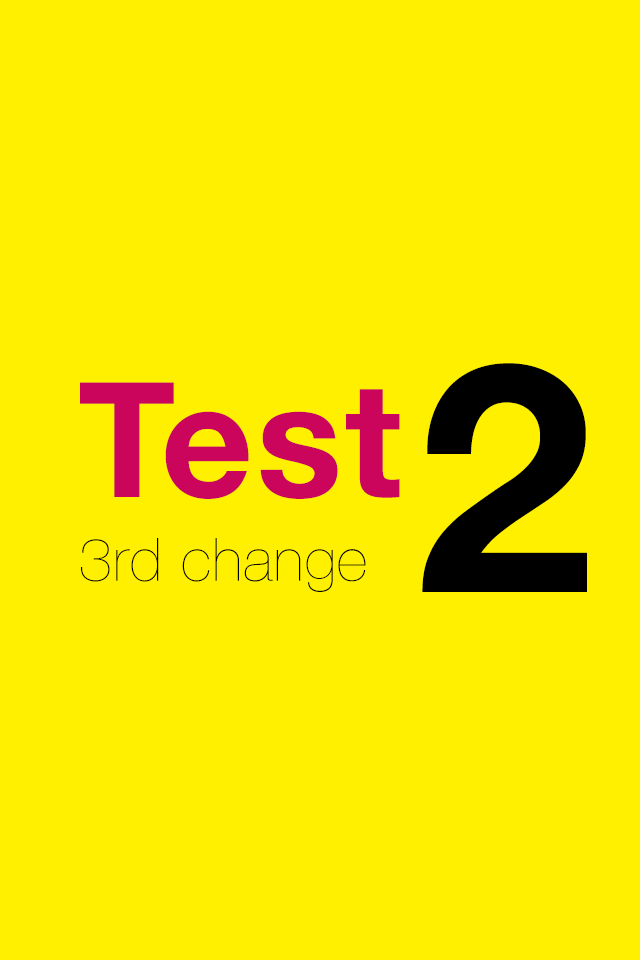
<style>
.page{position:relative;width:640px;height:960px;background:#fff000}
.page>*{position:absolute;margin:0}
.t1{font:320px "HelveticaNeue-Bold";letter-spacing:0.02em;color:#000000}
.t2{font:160px "HelveticaNeue-Bold";letter-spacing:0.02em;color:#cb045c}
.t3{font:60px "HelveticaNeue-UltraLight";letter-spacing:0.02em;color:#000000}
</style>
<div class="page">
<p class="t1" style="left:422px;top:363px;width:165px;height:229px">2</p>
<p class="t2" style="left:80px;top:382px;width:320px;height:117px">Test</p>
<p class="t3" style="left:81px;top:538px;width:285px;height:54px">3rd change</p>
</div>
